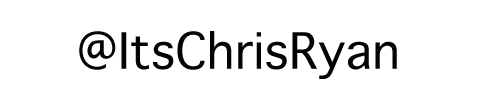
<style>
.page{position:relative;width:500px;height:100px;background:#ffffff}
.page>*{position:absolute;margin:0}
.t1{font:48px "Thonburi";color:#040404}
</style>
<div class="page">
<p class="t1" style="left:79px;top:31px;width:318px;height:48px">@ItsChrisRyan</p>
</div>
